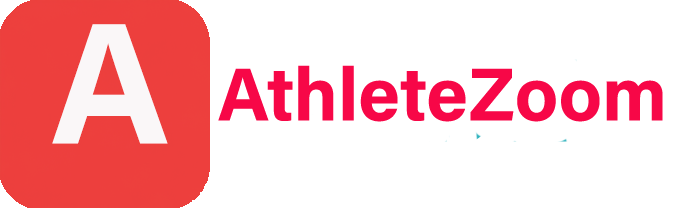
<style>
.page{position:relative;width:683px;height:208px;background:#ffffff}
.page>*{position:absolute;margin:0}
.t1{font:172.5px "AcuminPro-Bold";color:#faf7f8}
.t2{font:74.9px "AcuminPro-Bold";color:#f70747}
</style>
<div class="page">
<p class="t1" style="left:52px;top:24px;width:116px;height:120px">A</p>
<p class="t2" style="left:218px;top:65px;width:445px;height:57px">AthleteZoom</p>
</div>
